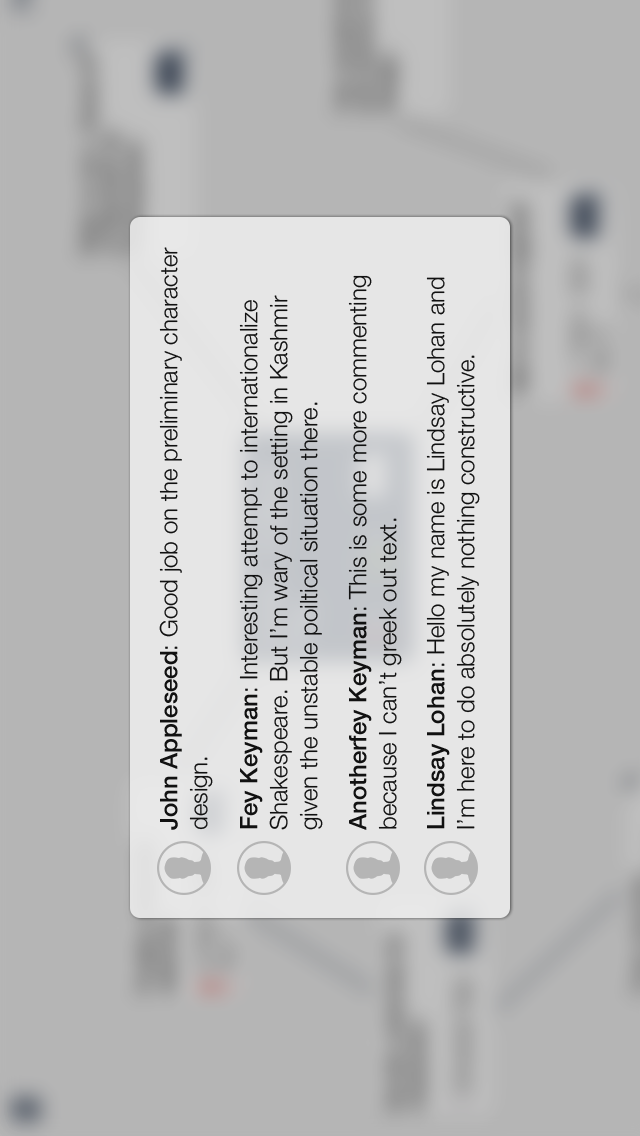
<style>
.page{position:relative;width:640px;height:1136px;background:#b5b5b5}
.page>*{position:absolute;margin:0}
.t1{font:24px "HelveticaNeue-Light";color:#111111}
.t2{font:24px "HelveticaNeue-Medium";color:#111111}
</style>
<div class="page">
<p class="t1" style="left:159px;top:247px;width:54px;height:583px;rotate:-90deg"><span class="t2">John Appleseed</span>: Good job on the preliminary character design.</p>
<p class="t1" style="left:348px;top:275px;width:54px;height:555px;rotate:-90deg"><span class="t2">Anotherfey Keyman</span>: This is some more commenting because I can’t greek out text.</p>
<p class="t1" style="left:426px;top:277px;width:54px;height:552px;rotate:-90deg"><span class="t2">Lindsay Lohan</span>: Hello my name is Lindsay Lohan and I’m here to do absolutely nothing constructive.</p>
<p class="t1" style="left:239px;top:295px;width:84px;height:535px;rotate:-90deg"><span class="t2">Fey Keyman</span>: Interesting attempt to internationalize Shakespeare. But I’m wary of the setting in Kashmir given the unstable poiltical situation there.</p>
</div>
